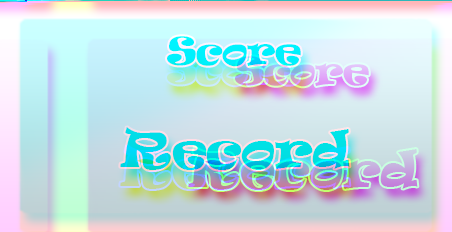
<style>
.page{position:relative;width:452px;height:232px}
.page>*{position:absolute;margin:0}
.t1{font:36px "Ravie";color:#00f2fd}
.t2{font:48px "Ravie"}
</style>
<div class="page">
<p class="t1" style="left:167px;top:35px;width:134px;height:31px">Score</p>
<p class="t2" style="left:120px;top:126px;width:230px;height:43px">Record</p>
</div>
